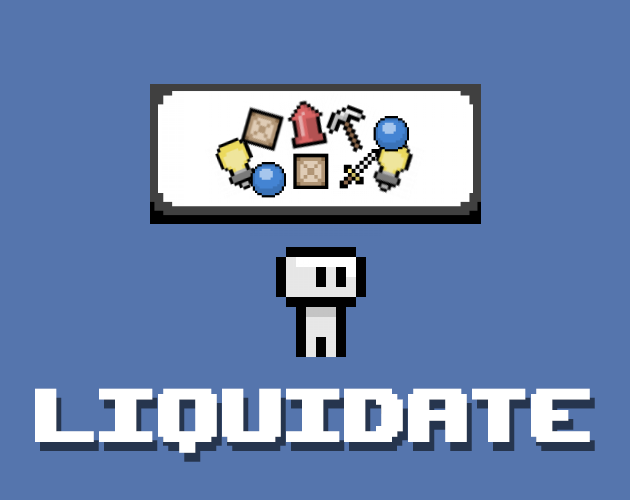
<style>
.page{position:relative;width:630px;height:500px;background:#5575ad}
.page>*{position:absolute;margin:0}
.t1{font:113.6px "Upheaval -BRK-";color:#ffffff}
</style>
<div class="page">
<p class="t1" style="left:35px;top:388px;width:555px;height:65px">Liquidate</p>
</div>
